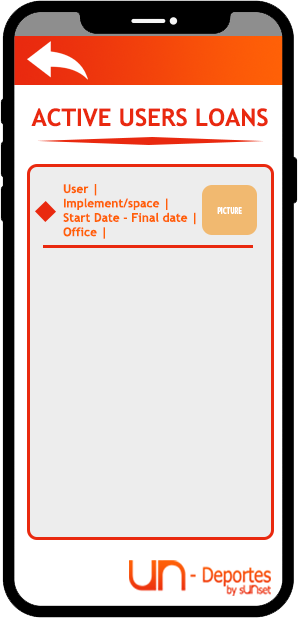
<style>
.page{position:relative;width:298px;height:618px;background:#ededed}
.page>*{position:absolute;margin:0}
.t1{font:24px "TrebuchetMS-Bold";color:#e9290f}
.t2{font:12px "TrebuchetMS-Bold";color:#ff6107}
.t3{font:9px "MyriadPro-Bold";color:#ffffff;scale:0.7 1}
</style>
<div class="page">
<p class="t1" style="left:31px;top:108px;width:237px;height:19px">ACTIVE USERS LOANS</p>
<p class="t2" style="left:63px;top:184px;width:133px;height:55px">User |<br>Implement/space | <br>Start Date - Final date |<br>Office |</p>
<p class="t3" style="left:217px;top:207px;width:25px;height:7px">PICTURE</p>
</div>
